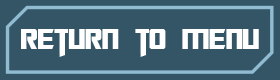
<style>
.page{position:relative;width:280px;height:80px;background:#335566}
.page>*{position:absolute;margin:0}
.t1{font:32px "TransformersMovie";color:#ffffff}
</style>
<div class="page">
<p class="t1" style="left:21px;top:29px;width:238px;height:28px">Return to menu</p>
</div>
